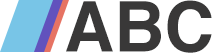
<style>
.page{position:relative;width:212px;height:53px;background:#ffffff}
.page>*{position:absolute;margin:0}
.t1{font:69.6px "Helvetica-Bold";color:#393838}
</style>
<div class="page">
<p class="t1" style="left:66px;top:0px;width:146px;height:53px">ABC</p>
</div>
